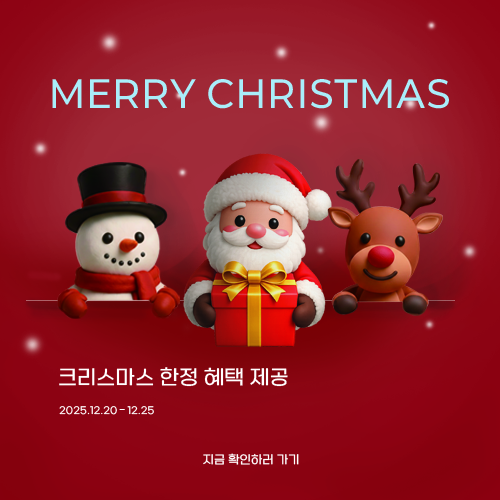
<style>
.page{position:relative;width:500px;height:500px}
.page>*{position:absolute;margin:0}
.t1{font:36.8px "Paperlogy-5Medium";letter-spacing:0.06em;color:#a9eefa}
.t2{font:20.5px "SBAggroL";letter-spacing:0.02em;color:#ffffff}
.t3{font:9.9px "SBAggroL";letter-spacing:0.02em;color:#ffffff}
.t4{font:9.9px "Gulim";letter-spacing:0.02em;color:#ffffff}
.t5{font:12px "SBAggroL";letter-spacing:0.02em;color:#ffffff}
</style>
<div class="page">
<p class="t1" style="left:52px;top:79px;width:397px;height:30px">MERRY CHRISTMAS</p>
<p class="t2" style="left:59px;top:367px;width:229px;height:20px">크리스마스 한정 혜택 제공</p>
<p class="t3" style="left:59px;top:406px;width:95px;height:9px">2025.12.20 <span class="t4">–</span> 12.25</p>
<p class="t5" style="left:203px;top:453px;width:96px;height:12px">지금 확인하러 가기</p>
</div>
